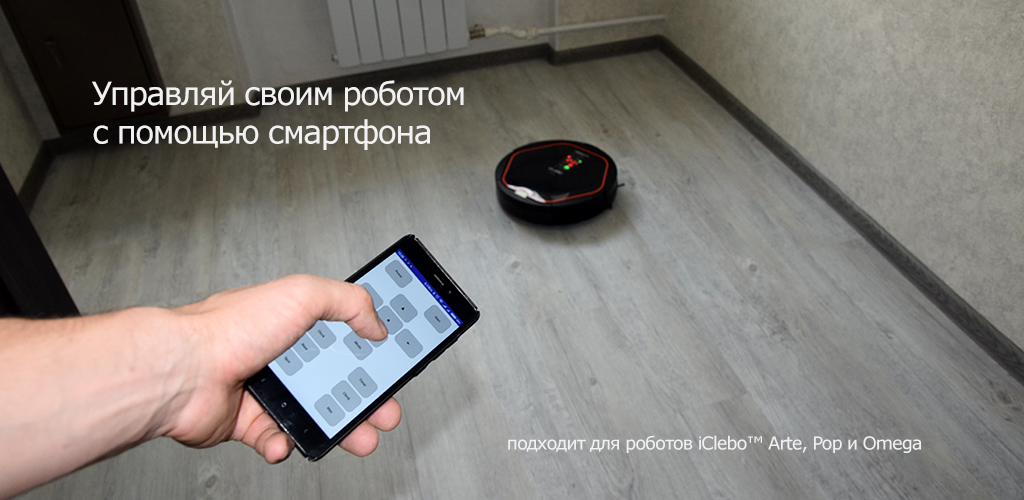
<style>
.page{position:relative;width:1024px;height:500px}
.page>*{position:absolute;margin:0}
.t1{font:32px "Verdana";letter-spacing:-0.06em;color:#f1f1f1}
.t2{font:18px "Verdana";letter-spacing:-0.06em;color:#f1f1f1}
</style>
<div class="page">
<p class="t1" style="left:92px;top:80px;width:372px;height:70px">Управляй своим роботом<br>с помощью смартфона</p>
<p class="t2" style="left:508px;top:435px;width:413px;height:18px">подходит для роботов iClebo™ Arte, Pop и Omega</p>
</div>
